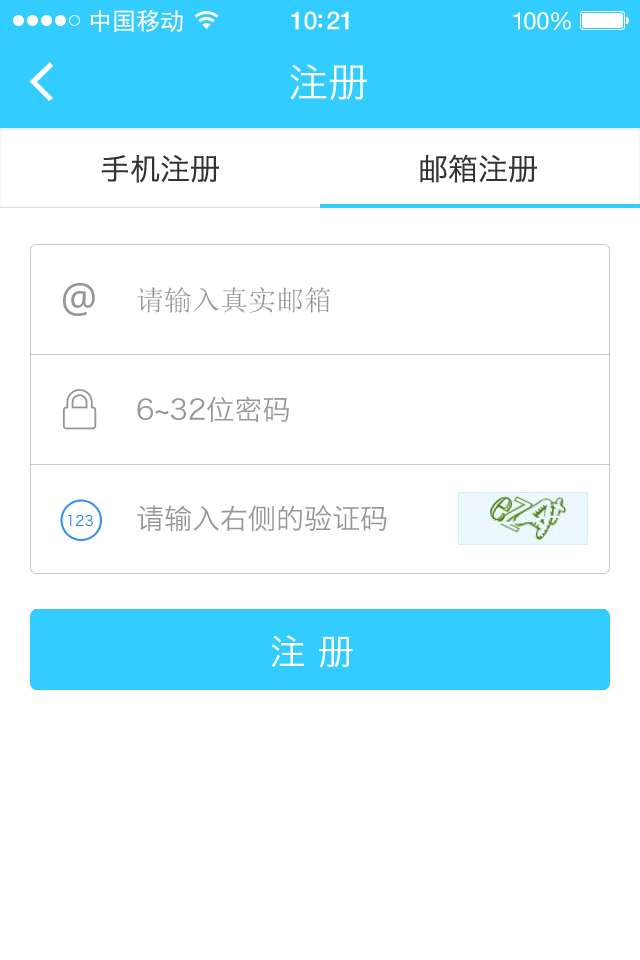
<style>
.page{position:relative;width:640px;height:960px;background:#ffffff}
.page>*{position:absolute;margin:0}
.t1{font:24px "SimHei";color:#ffffff}
.t2{font:25px "HelveticaNeue-Medium";letter-spacing:-0.02em;color:#ffffff}
.t3{font:24px "HelveticaNeue";letter-spacing:-0.02em;color:#ffffff}
.t4{font:40px "HiraginoSansGB-W3";color:#ffffff}
.t5{font:30px "HiraginoSansGB-W3";color:#333333}
.t6{font:28px "SimSun";color:#969696}
.t7{font:28px "HiraginoSansGB-W3";color:#969696}
.t8{font:14px "HiraginoSansGB-W3";color:#197fee}
.t9{font:36px "HiraginoSansGB-W3";color:#ffffff}
</style>
<div class="page">
<p class="t1" style="left:90px;top:10px;width:93px;height:22px">中国移动</p>
<p class="t2" style="left:291px;top:11px;width:58px;height:19px">10:21</p>
<p class="t3" style="left:513px;top:12px;width:58px;height:18px">100%</p>
<p class="t4" style="left:290px;top:64px;width:77px;height:37px">注册</p>
<p class="t5" style="left:101px;top:155px;width:118px;height:28px">手机注册</p>
<p class="t5" style="left:420px;top:154px;width:117px;height:29px">邮箱注册</p>
<p class="t6" style="left:137px;top:287px;width:194px;height:26px">请输入真实邮箱</p>
<p class="t7" style="left:137px;top:396px;width:152px;height:26px">6~32位密码</p>
<p class="t7" style="left:137px;top:505px;width:250px;height:27px">请输入右侧的验证码</p>
<p class="t8" style="left:68px;top:515px;width:25px;height:11px">123</p>
<p class="t9" style="left:271px;top:635px;width:82px;height:33px">注 册</p>
</div>
